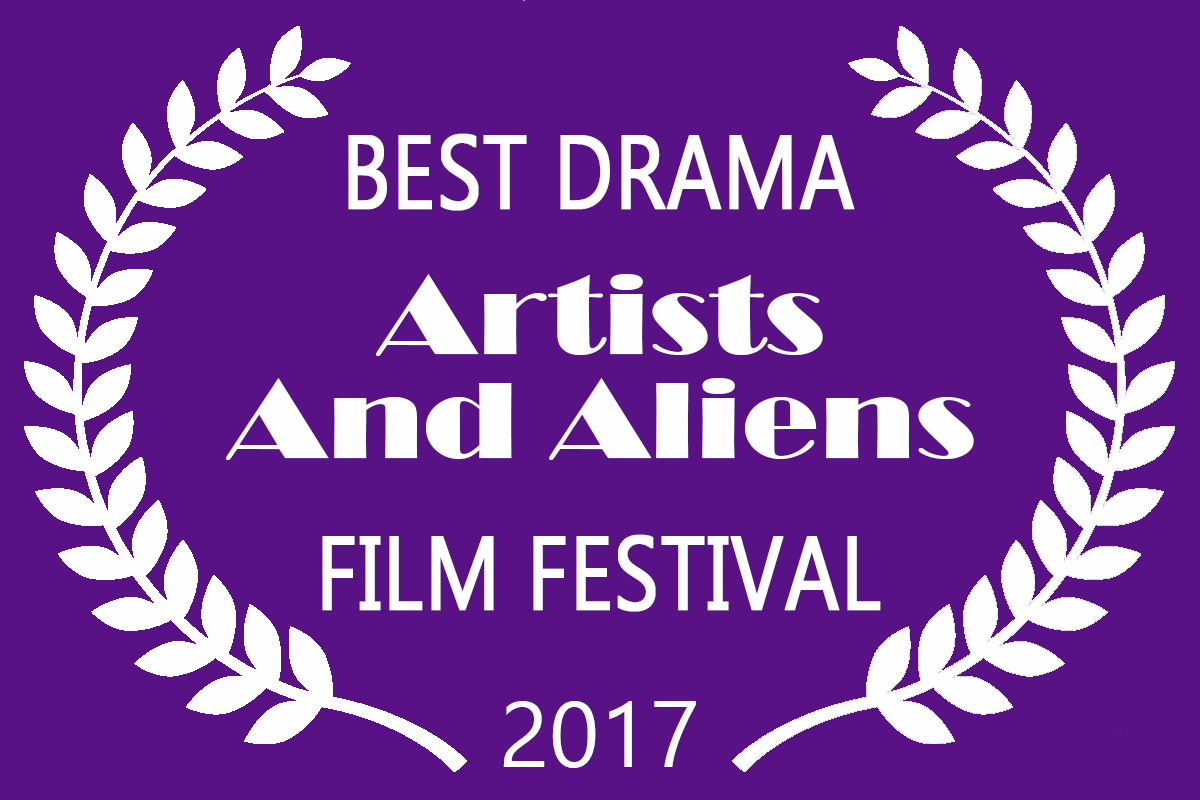
<style>
.page{position:relative;width:1200px;height:800px;background:#591286}
.page>*{position:absolute;margin:0}
.t1{font:104.2px "Ebrima";color:#fffefe;font-weight:bold;scale:0.8 1}
.t2{font:113.3px "Broadway";color:#fffefe;scale:1.12 1}
.t3{font:93.3px "Ebrima";color:#fffefe}
</style>
<div class="page">
<p class="t1" style="left:348px;top:133px;width:507px;height:78px">BEST DRAMA</p>
<p class="t2" style="left:376px;top:274px;width:447px;height:82px">Artists</p>
<p class="t2" style="left:226px;top:378px;width:748px;height:82px">And Aliens</p>
<p class="t1" style="left:322px;top:534px;width:559px;height:78px">FILM FESTIVAL</p>
<p class="t3" style="left:503px;top:701px;width:193px;height:67px">2017</p>
</div>
